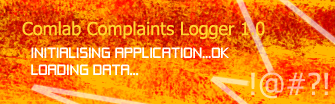
<style>
.page{position:relative;width:335px;height:104px}
.page>*{position:absolute;margin:0}
.t1{font:18px "Tahoma";color:#ffd52f}
.t2{font:14px "ZeroThrees";color:#ffffff}
.t3{font:30px "Tahoma"}
</style>
<div class="page">
<p class="t1" style="left:22px;top:21px;width:243px;height:18px">Comlab Complaints Logger 1.0</p>
<p class="t2" style="left:31px;top:47px;width:198px;height:29px">INITIALISING APPLICATION...OK<br>LOADING DATA...</p>
<p class="t3" style="left:251px;top:72px;width:77px;height:27px">!@#?!</p>
</div>
